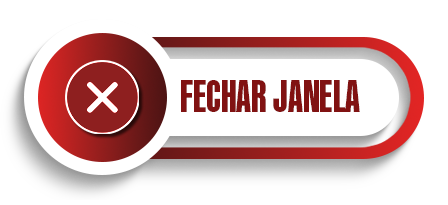
<style>
.page{position:relative;width:448px;height:205px;background:#ffffff}
.page>*{position:absolute;margin:0}
.t1{font:46.1px "KanedaGothic-ExtraBold";color:#811212}
</style>
<div class="page">
<p class="t1" style="left:181px;top:80px;width:179px;height:32px">FECHAR JANELA</p>
</div>
